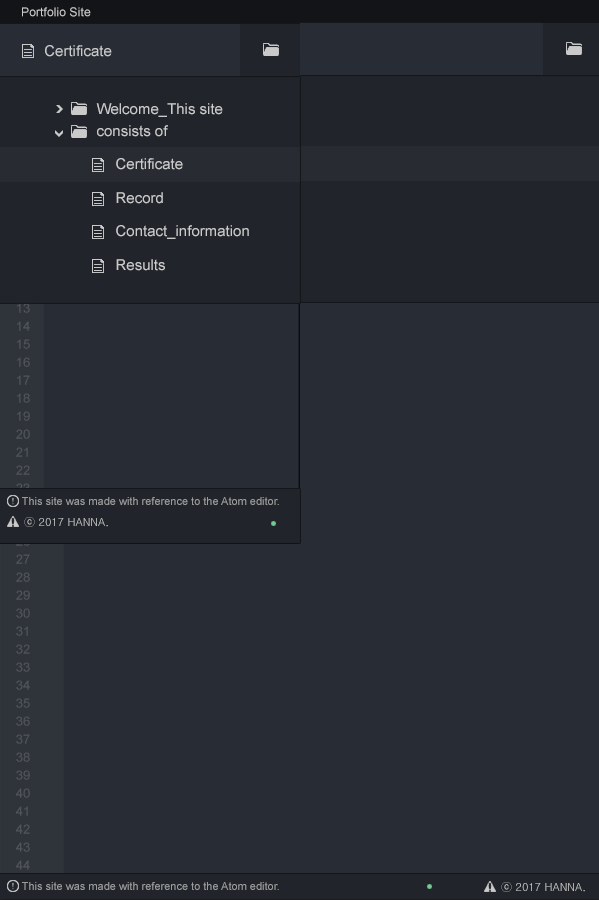
<style>
.page{position:relative;width:599px;height:900px;background:#282c34}
.page>*{position:absolute;margin:0}
.t1{font:12px "ArialMT";letter-spacing:0.01em;color:#cacaca}
.t2{font:15px "ArialMT";color:#cacaca}
.t3{font:11px "ArialMT";color:#9c9c9c}
.t4{font:11px "Gulim";color:#cacaca}
</style>
<div class="page">
<p class="t1" style="left:22px;top:7px;width:69px;height:10px">Portfolio Site</p>
<p class="t2" style="left:45px;top:45px;width:67px;height:12px">Certificate</p>
<p class="t2" style="left:96px;top:103px;width:127px;height:14px">Welcome_This site</p>
<p class="t2" style="left:97px;top:125px;width:71px;height:12px">consists of</p>
<p class="t2" style="left:116px;top:158px;width:67px;height:12px">Certificate</p>
<p class="t2" style="left:116px;top:192px;width:47px;height:12px">Record</p>
<p class="t2" style="left:116px;top:225px;width:133px;height:14px">Contact_information</p>
<p class="t2" style="left:116px;top:259px;width:49px;height:12px">Results</p>
<p class="t3" style="left:22px;top:497px;width:257px;height:8px">This site was made with reference to the Atom editor.</p>
<p class="t4" style="left:24px;top:517px;width:84px;height:10px">ⓒ 2017 HANNA.</p>
</div>
